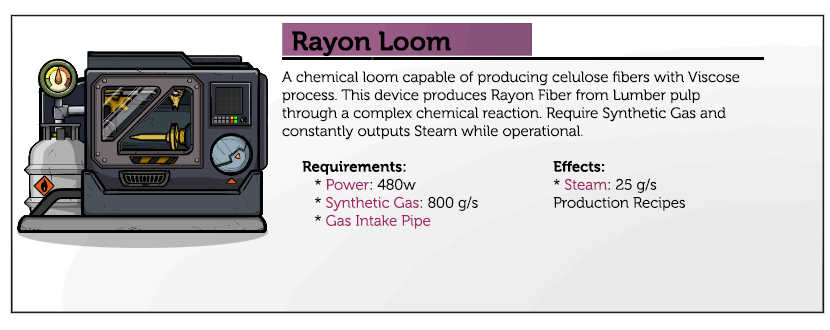
<style>
.page{position:relative;width:830px;height:330px;background:#ffffff}
.page>*{position:absolute;margin:0}
.t1{font:26.7px "Museo-700";color:#000000}
.t2{font:15px "Museo-300";color:#000000}
.t3{font:15px "Museo-300";color:#a12864}
.t4{font:15px "Museo-700";color:#000000}
</style>
<div class="page">
<p class="t1" style="left:292px;top:31px;width:159px;height:26px">Rayon Loom</p>
<p class="t2" style="left:282px;top:71px;width:458px;height:69px">A chemical loom capable of producing celulose fibers with Viscose process. This device produces Rayon Fiber from Lumber pulp through a complex chemical reaction. Require Synthetic Gas and constantly outputs Steam while operational.</p>
<p class="t3" style="left:302px;top:161px;width:176px;height:68px"><span class="t4">Requirements:<br></span><span class="t2">   * </span>Power<span class="t2">: 480w<br>   * </span>Synthetic Gas<span class="t2">: 800 g/s<br>   * </span>Gas Intake Pipe</p>
<p class="t2" style="left:553px;top:160px;width:132px;height:51px"><span class="t4">Effects:<br></span>* <span class="t3">Steam</span>: 25 g/s<br>Production Recipes</p>
</div>
